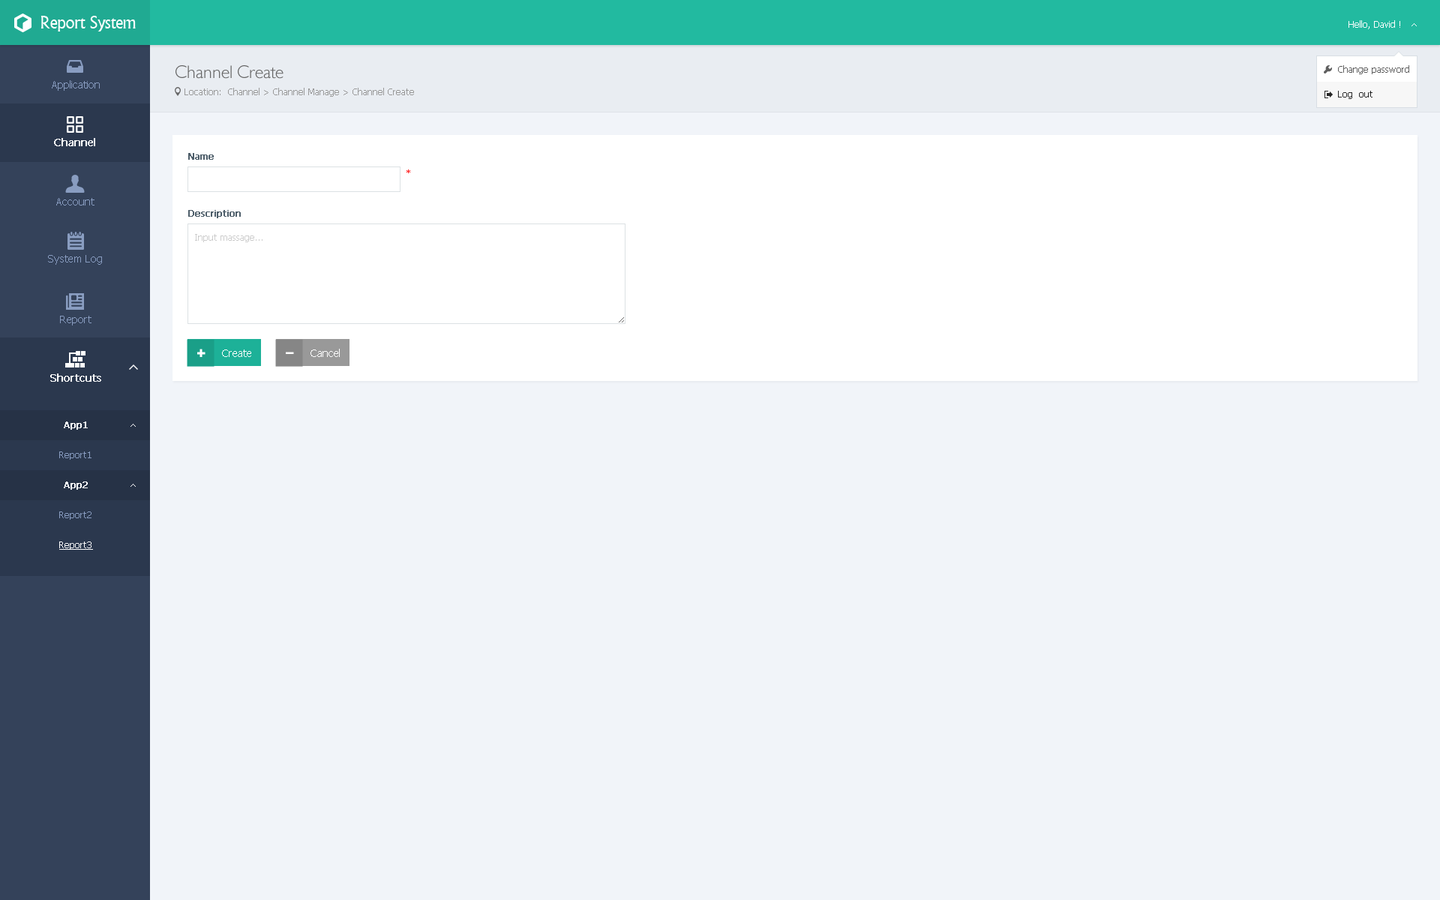
<style>
.page{position:relative;width:1440px;height:900px;background:#f1f4f9}
.page>*{position:absolute;margin:0}
.t1{font:18px "Narkisim";letter-spacing:-0.022em;color:#ffffff}
.t2{font:9px "Tahoma";color:#ffffff}
.t3{font:18px "084-CAI978";color:#666666}
.t4{font:9px "Tahoma";color:#5f5f5f}
.t5{font:10.5px "Tahoma";color:#899dc1}
.t6{font:9px "Tahoma";color:#999999}
.t7{font:9px "Tahoma";color:#262626}
.t8{font:10.5px "Tahoma";color:#ffffff;font-weight:bold}
.t9{font:9px "Tahoma";color:#4e5e6a;font-weight:bold}
.t10{font:9px "Tahoma";color:#ff0000}
.t11{font:9px "Tahoma";color:#cccccc}
.t12{font:10.5px "Tahoma";color:#ffffff}
.t13{font:9px "Tahoma";color:#ffffff;font-weight:bold}
.t14{font:9px "Tahoma";color:#899dc1}
.t15{font:9px "Tahoma";color:#ffffff;text-decoration:underline}
</style>
<div class="page">
<p class="t1" style="left:40px;top:16px;width:96px;height:16px">Report System</p>
<p class="t2" style="left:1348px;top:20px;width:52px;height:9px">Hello, David !</p>
<p class="t3" style="left:176px;top:65px;width:108px;height:14px">Channel Create</p>
<p class="t4" style="left:1338px;top:65px;width:71px;height:9px">Change password</p>
<p class="t5" style="left:52px;top:80px;width:48px;height:11px">Application</p>
<p class="t6" style="left:184px;top:88px;width:230px;height:9px">Location:  Channel &gt; Channel Manage &gt; Channel Create</p>
<p class="t7" style="left:1338px;top:91px;width:34px;height:8px">Log  out</p>
<p class="t8" style="left:54px;top:138px;width:41px;height:8px">Channel</p>
<p class="t9" style="left:188px;top:153px;width:26px;height:7px">Name</p>
<p class="t10" style="left:406px;top:170px;width:4px;height:3px">*</p>
<p class="t5" style="left:56px;top:198px;width:38px;height:8px">Account</p>
<p class="t9" style="left:188px;top:210px;width:53px;height:8px">Description</p>
<p class="t11" style="left:195px;top:234px;width:67px;height:8px">Input massage...</p>
<p class="t5" style="left:48px;top:255px;width:54px;height:10px">System Log</p>
<p class="t5" style="left:60px;top:316px;width:32px;height:10px">Report</p>
<p class="t12" style="left:222px;top:350px;width:29px;height:7px">Create</p>
<p class="t12" style="left:310px;top:349px;width:30px;height:8px">Cancel</p>
<p class="t8" style="left:50px;top:374px;width:51px;height:8px">Shortcuts</p>
<p class="t13" style="left:64px;top:422px;width:24px;height:8px">App1</p>
<p class="t14" style="left:59px;top:452px;width:33px;height:8px">Report1</p>
<p class="t13" style="left:64px;top:482px;width:24px;height:8px">App2</p>
<p class="t14" style="left:59px;top:512px;width:33px;height:8px">Report2</p>
<p class="t15" style="left:59px;top:542px;width:34px;height:8px">Report3</p>
</div>
